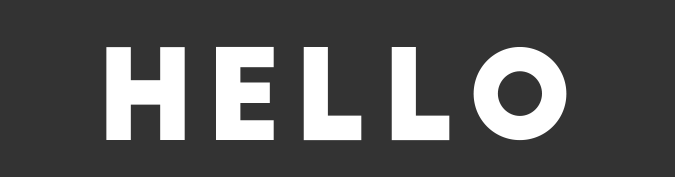
<style>
.page{position:relative;width:675px;height:177px;background:#333333}
.page>*{position:absolute;margin:0}
.t1{font:123.5px "BigJohn";letter-spacing:0.1em;color:#ffffff;text-transform:uppercase}
</style>
<div class="page">
<p class="t1" style="left:106px;top:46px;width:461px;height:95px">hello</p>
</div>
